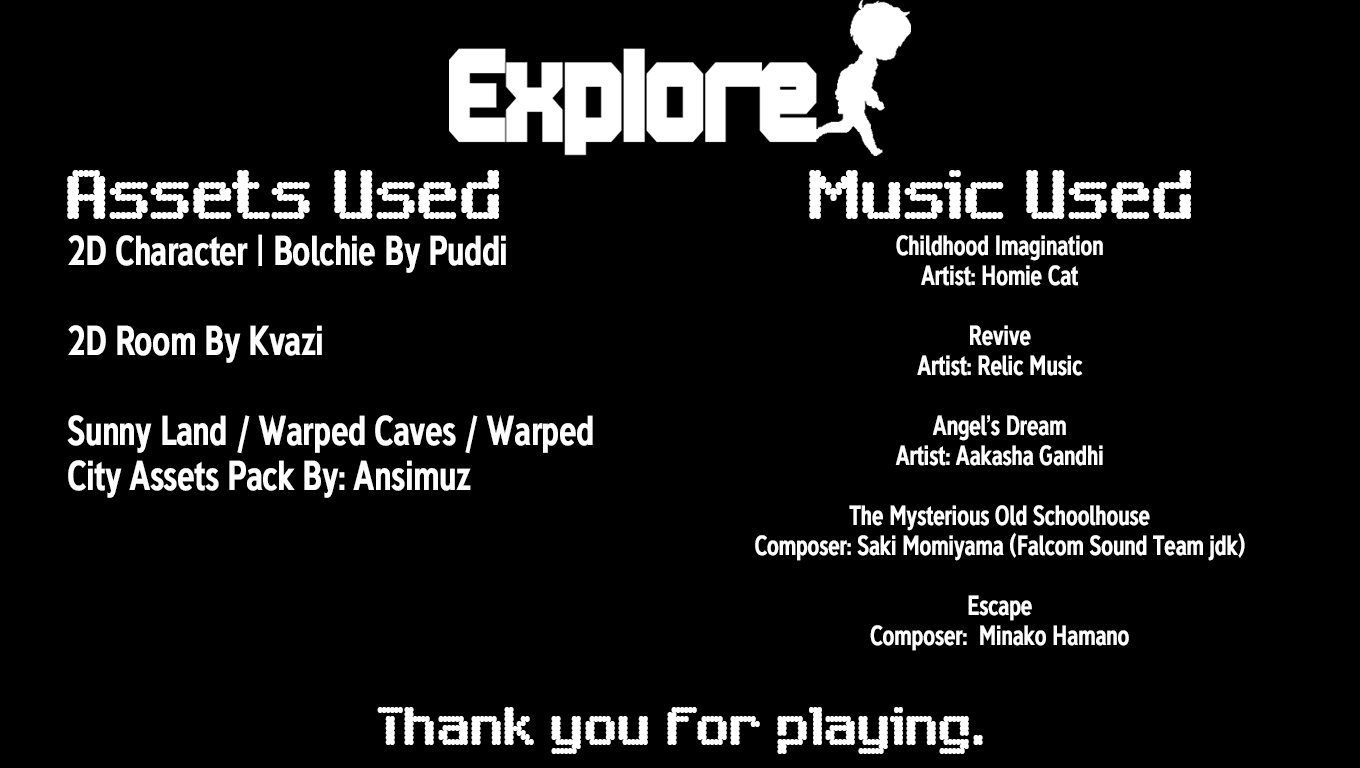
<style>
.page{position:relative;width:1360px;height:768px;background:#000000}
.page>*{position:absolute;margin:0}
.t1{font:75px "SixEightZeroNineChargen-Regular";letter-spacing:-0.025em;color:#ffffff;scale:0.88 1}
.t2{font:37.5px "DeansgateCondensed-Bold";letter-spacing:-0.025em;color:#ffffff;scale:0.88 1}
.t3{font:25px "DeansgateCondensed-Bold";letter-spacing:-0.025em;color:#ffffff;scale:0.88 1}
.t4{font:58.3px "SixEightZeroNineChargen-Regular";letter-spacing:-0.025em;color:#ffffff;scale:0.88 1}
</style>
<div class="page">
<p class="t1" style="left:67px;top:170px;width:432px;height:49px">Assets Used</p>
<p class="t1" style="left:809px;top:170px;width:382px;height:49px">Music Used</p>
<p class="t2" style="left:67px;top:234px;width:526px;height:264px">2D Character | Bolchie By Puddi<br><br>2D Room By Kvazi<br><br>Sunny Land / Warped Caves / Warped City Assets Pack By: Ansimuz</p>
<p class="t3" style="left:755px;top:235px;width:490px;height:416px;text-align:center">Childhood Imagination <br>Artist: Homie Cat<br><br>Revive<br>Artist: Relic Music<br><br>Angel’s Dream<br>Artist: Aakasha Gandhi<br><br>The Mysterious Old Schoolhouse<br>Composer: Saki Momiyama (Falcom Sound Team jdk)<br><br>Escape<br>Composer:  Minako Hamano</p>
<p class="t4" style="left:377px;top:707px;width:606px;height:47px">Thank you for playing.</p>
</div>
